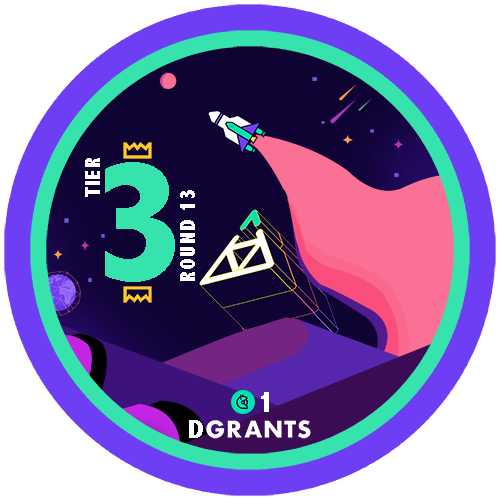
<style>
.page{position:relative;width:500px;height:500px;background:#ffffff}
.page>*{position:absolute;margin:0}
.t1{font:21.8px "AbadiMT-CondensedExtraBold";letter-spacing:0.05em;color:#ffffff}
.t2{font:178.3px "AbadiMT-CondensedExtraBold";letter-spacing:0.05em;color:#37e3ad}
.t3{font:30.9px "AbadiMT-CondensedExtraBold";letter-spacing:0.05em;color:#ffffff}
.t4{font:26.2px "AbadiMT-CondensedExtraBold";letter-spacing:0.05em;color:#fcfcfc;scale:1.2 1}
</style>
<div class="page">
<p class="t1" style="left:85px;top:158px;width:15px;height:39px;rotate:-90deg">TIER</p>
<p class="t2" style="left:105px;top:162px;width:70px;height:120px">3</p>
<p class="t1" style="left:180px;top:190px;width:15px;height:91px;rotate:-90deg">ROUND 13</p>
<p class="t3" style="left:261px;top:392px;width:8px;height:20px">1</p>
<p class="t4" style="left:189px;top:420px;width:14px;height:18px">D</p>
</div>
